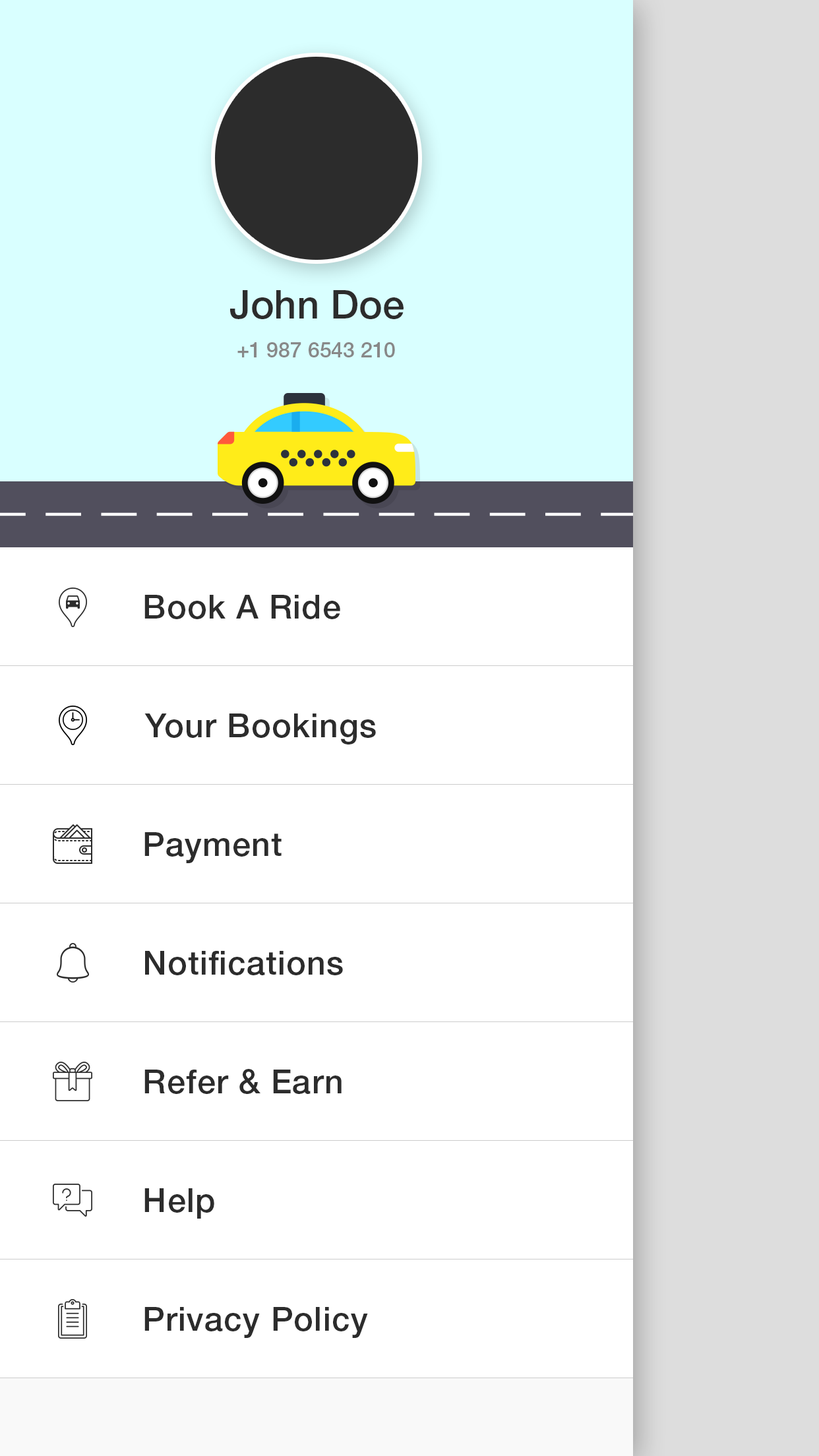
<style>
.page{position:relative;width:819px;height:1456px;background:#ffffff}
.page>*{position:absolute;margin:0}
.t1{font:39.6px "HelveticaNeueLTStd-Md";color:#2c2c2c}
.t2{font:21.1px "HelveticaNeueLTStd-Md";color:#888888}
.t3{font:33px "HelveticaNeueLTStd-Md";letter-spacing:0.025em;color:#2c2c2c}
</style>
<div class="page">
<p class="t1" style="left:230px;top:290px;width:174px;height:29px">John Doe</p>
<p class="t2" style="left:237px;top:342px;width:158px;height:15px">+1 987 6543 210</p>
<p class="t3" style="left:144px;top:595px;width:196px;height:24px">Book A Ride</p>
<p class="t3" style="left:144px;top:713px;width:232px;height:31px">Your Bookings</p>
<p class="t3" style="left:144px;top:832px;width:138px;height:31px">Payment</p>
<p class="t3" style="left:145px;top:951px;width:198px;height:24px">Notifications</p>
<p class="t3" style="left:144px;top:1069px;width:198px;height:25px">Refer &amp; Earn</p>
<p class="t3" style="left:144px;top:1188px;width:70px;height:31px">Help</p>
<p class="t3" style="left:144px;top:1307px;width:224px;height:31px">Privacy Policy</p>
</div>
